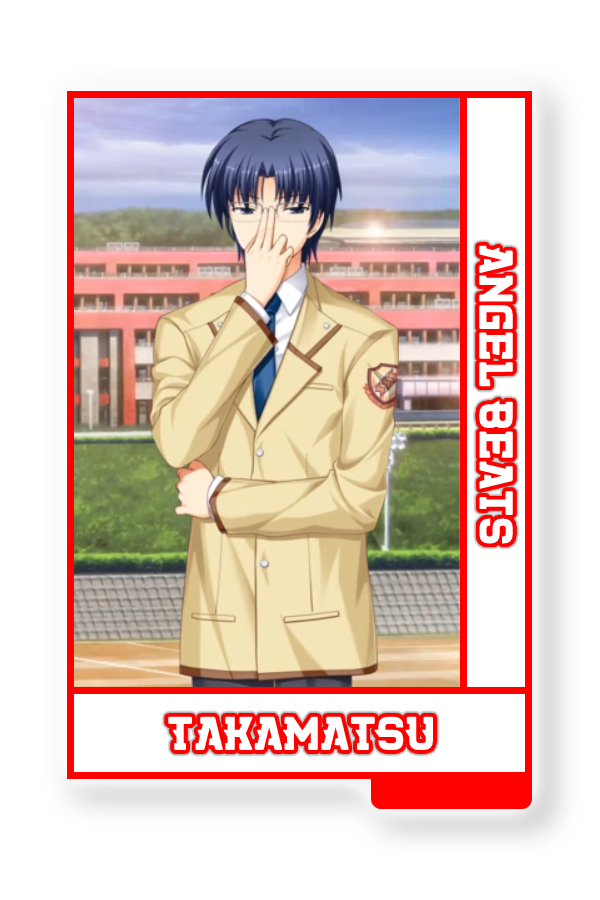
<style>
.page{position:relative;width:600px;height:900px;background:#ffffff}
.page>*{position:absolute;margin:0}
.t1{font:48.8px "KillerCollege";color:#ffffff}
.t2{font:48.6px "KillerCollege";color:#ffffff}
</style>
<div class="page">
<p class="t1" style="left:479px;top:245px;width:34px;height:299px;rotate:90deg">Angel Beats</p>
<p class="t2" style="left:168px;top:716px;width:265px;height:35px">TAKAMATSU</p>
</div>
